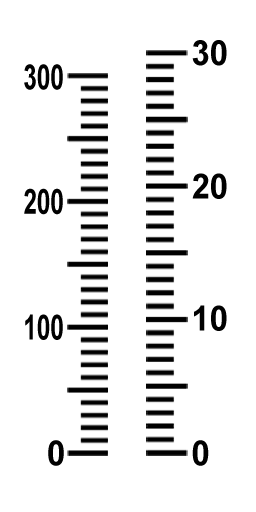
<style>
.page{position:relative;width:256px;height:512px;background:#ffffff}
.page>*{position:absolute;margin:0}
.t1{font:34.5px "Arial-BoldMT";color:#010101;scale:0.95 1}
.t2{font:34.5px "Arial-BoldMT";color:#010101;scale:0.7 1}
</style>
<div class="page">
<p class="t1" style="left:192px;top:40px;width:35px;height:26px">30</p>
<p class="t2" style="left:24px;top:64px;width:39px;height:26px">300</p>
<p class="t1" style="left:192px;top:173px;width:35px;height:26px">20</p>
<p class="t2" style="left:24px;top:188px;width:39px;height:27px">200</p>
<p class="t1" style="left:194px;top:305px;width:33px;height:26px">10</p>
<p class="t2" style="left:25px;top:314px;width:38px;height:26px">100</p>
<p class="t1" style="left:48px;top:440px;width:16px;height:26px">0</p>
<p class="t1" style="left:192px;top:440px;width:17px;height:26px">0</p>
</div>
